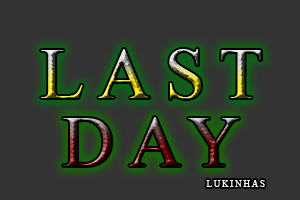
<style>
.page{position:relative;width:300px;height:200px;background:#333333}
.page>*{position:absolute;margin:0}
.t1{font:72px "TimesNewRomanPSMT";letter-spacing:0.2em;text-transform:uppercase}
.t2{font:9px "TimesNewRomanPSMT";letter-spacing:0.2em;color:#ffffff;text-transform:uppercase}
</style>
<div class="page">
<p class="t1" style="left:41px;top:49px;width:221px;height:50px">last</p>
<p class="t1" style="left:63px;top:117px;width:176px;height:49px">Day</p>
<p class="t2" style="left:206px;top:180px;width:59px;height:7px">Lukinhas</p>
</div>
